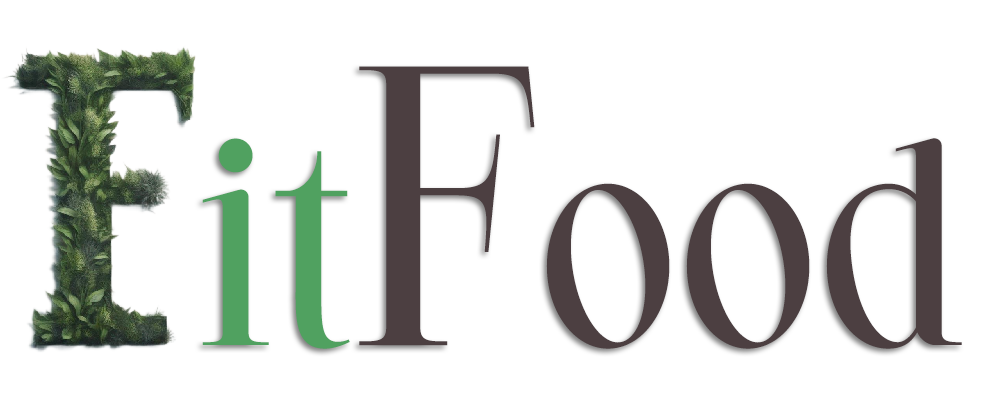
<style>
.page{position:relative;width:1000px;height:400px;background:#ffffff}
.page>*{position:absolute;margin:0}
.t1{font:300px "CornateRegular";color:#4c3f41}
.t2{font:300px "CornateRegular";color:#50a160}
.t3{font:400px "CornateRegular";color:#4c3f41}
</style>
<div class="page">
<p class="t1" style="left:202px;top:66px;width:760px;height:283px"><span class="t2">it</span><span class="t3">F</span>ood</p>
</div>
